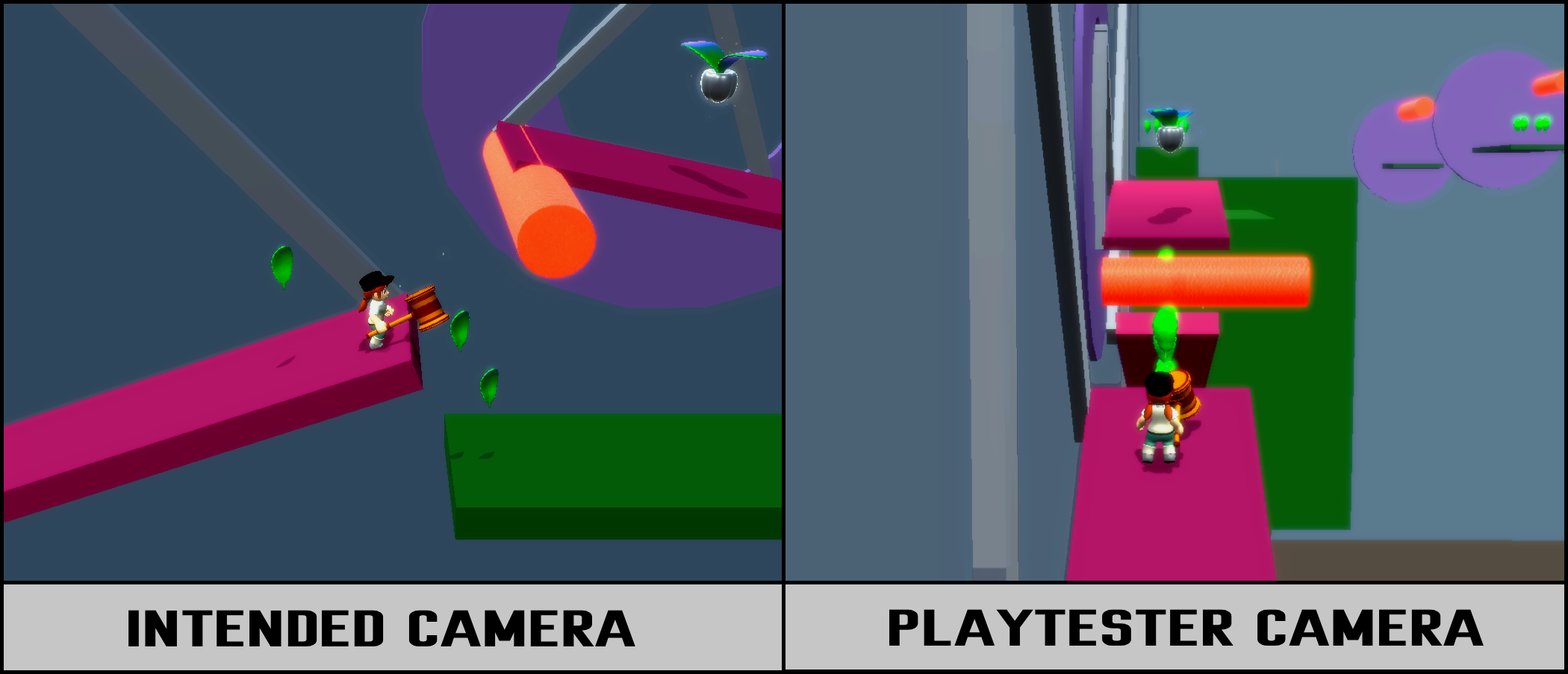
<style>
.page{position:relative;width:1568px;height:674px;background:#2e465b}
.page>*{position:absolute;margin:0}
.t1{font:74.7px "Dhurjati";color:#000000;font-weight:bold}
</style>
<div class="page">
<p class="t1" style="left:128px;top:610px;width:507px;height:37px">INTENDED CAMERA</p>
<p class="t1" style="left:889px;top:609px;width:595px;height:38px">PLAYTESTER CAMERA</p>
</div>
